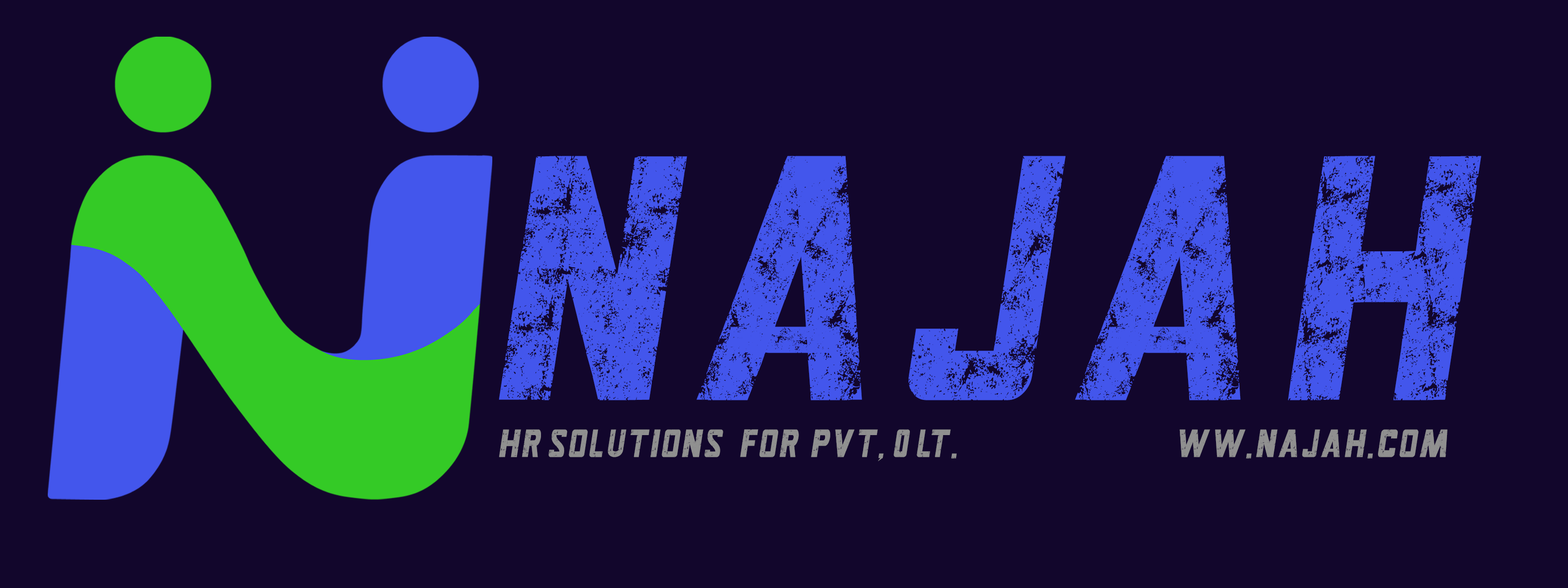
<style>
.page{position:relative;width:1568px;height:588px;background:#12062c}
.page>*{position:absolute;margin:0}
.t1{font:387px "SLEMAN-DEMO";letter-spacing:0.12em;color:#4356ec;text-transform:uppercase;font-style:italic;scale:0.86 1}
.t2{font:43.5px "SLEMAN-DEMO";letter-spacing:0.12em;color:#909090;text-transform:uppercase;font-style:italic;scale:0.86 1}
</style>
<div class="page">
<p class="t1" style="left:499px;top:156px;width:982px;height:244px">NAJAH</p>
<p class="t2" style="left:499px;top:429px;width:458px;height:32px">HR Solutions   for  PVT, 0 LT.</p>
<p class="t2" style="left:1179px;top:429px;width:268px;height:30px">ww.najah.com</p>
</div>
